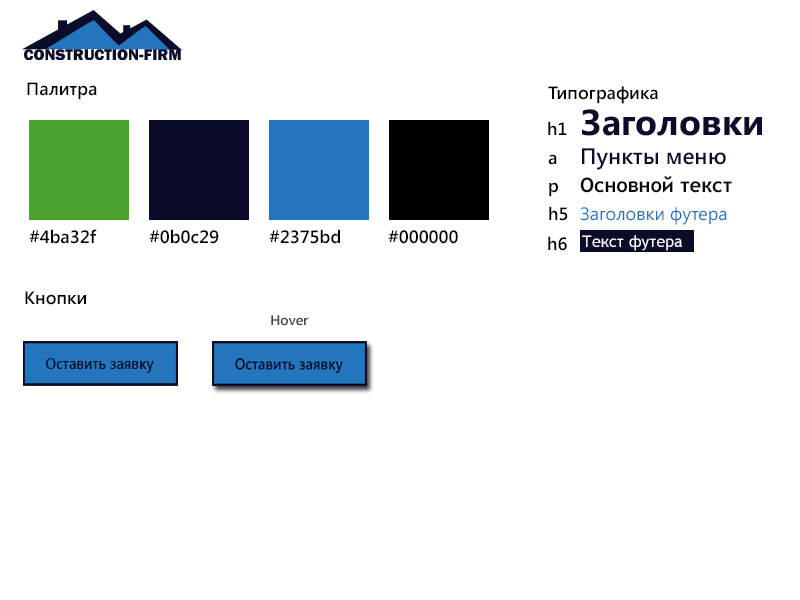
<style>
.page{position:relative;width:800px;height:600px;background:#ffffff}
.page>*{position:absolute;margin:0}
.t1{font:18px "SegoeUI-SemiBold";color:#000000}
.t2{font:36px "SegoeUI-Bold";color:#0b0c29}
.t3{font:22.5px "SegoeUI-SemiBold";color:#0b0c29}
.t4{font:20px "TrebuchetMS-Bold";color:#0a0907}
.t5{font:18px "SegoeUI";color:#2375bd}
.t6{font:16px "TrebuchetMS";color:#ffffff}
.t7{font:14px "SegoeUI-SemiBold";color:#46494c}
</style>
<div class="page">
<p class="t1" style="left:27px;top:82px;width:70px;height:18px">Палитра</p>
<p class="t1" style="left:548px;top:86px;width:110px;height:18px">Типографика</p>
<p class="t2" style="left:582px;top:109px;width:180px;height:27px">Заголовки</p>
<p class="t1" style="left:548px;top:121px;width:19px;height:14px">h1</p>
<p class="t3" style="left:582px;top:148px;width:144px;height:22px">Пункты меню</p>
<p class="t1" style="left:548px;top:154px;width:9px;height:11px">a</p>
<p class="t1" style="left:549px;top:182px;width:9px;height:15px">p</p>
<p class="t4" style="left:580px;top:176px;width:152px;height:17px">Основной текст</p>
<p class="t1" style="left:549px;top:206px;width:19px;height:15px">h5</p>
<p class="t5" style="left:580px;top:207px;width:147px;height:18px">Заголовки футера</p>
<p class="t1" style="left:29px;top:229px;width:68px;height:15px">#4ba32f</p>
<p class="t1" style="left:149px;top:229px;width:70px;height:15px">#0b0c29</p>
<p class="t1" style="left:269px;top:229px;width:71px;height:15px">#2375bd</p>
<p class="t1" style="left:388px;top:230px;width:70px;height:14px">#000000</p>
<p class="t1" style="left:548px;top:236px;width:19px;height:15px">h6</p>
<p class="t6" style="left:582px;top:235px;width:100px;height:16px">Текст футера</p>
<p class="t1" style="left:25px;top:291px;width:61px;height:14px">Кнопки</p>
<p class="t7" style="left:271px;top:315px;width:38px;height:11px">Hover</p>
</div>
